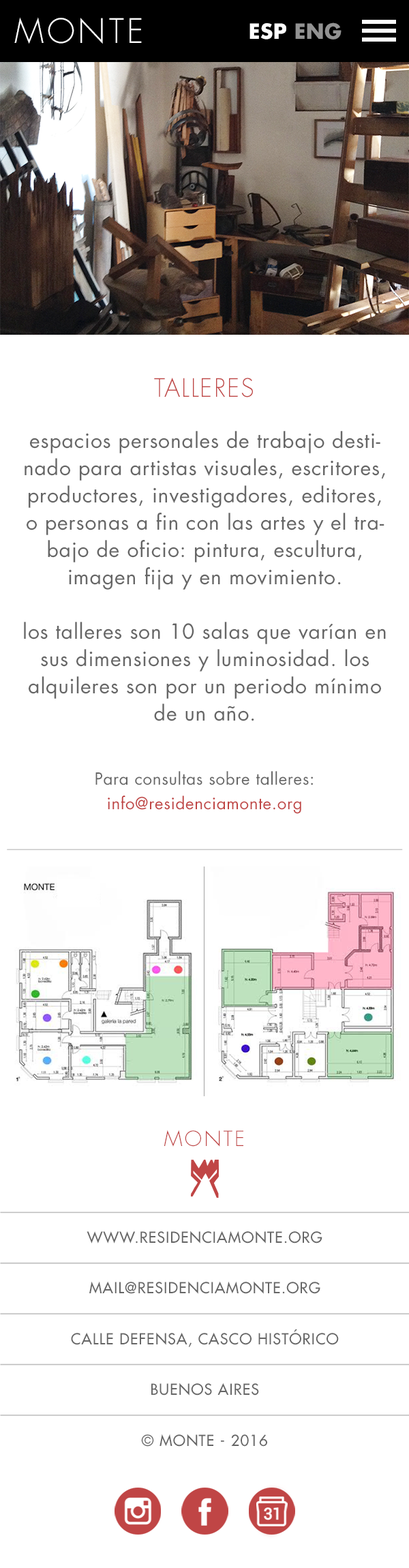
<style>
.page{position:relative;width:409px;height:1568px;background:#ffffff}
.page>*{position:absolute;margin:0}
.t1{font:32.7px "Futura-Light";letter-spacing:0.1em;color:#ffffff;text-transform:uppercase}
.t2{font:20.5px "Futura-Bold";letter-spacing:0.015em;color:#ffffff;text-transform:uppercase}
.t3{font:20.5px "Futura-Bold";letter-spacing:0.015em;color:#929292;text-transform:uppercase}
.t4{font:24.5px "Futura-Light";letter-spacing:0.05em;color:#c04645;text-transform:uppercase}
.t5{font:20.5px/27.3px "Futura-Book";letter-spacing:0.03em;color:#666666}
.t6{font:16.4px/24.5px "Futura-Book";letter-spacing:0.03em;color:#666666}
.t7{font:16.4px/24.5px "Futura-Book";letter-spacing:0.03em;color:#c04645}
.t8{font:20.5px "Futura-Light";letter-spacing:0.1em;color:#c04545}
.t9{font:15px/50.7px "Futura";letter-spacing:0.05em;color:#666666;text-transform:uppercase}
</style>
<div class="page">
<p class="t1" style="left:14px;top:17px;width:128px;height:27px">monte</p>
<p class="t2" style="left:250px;top:22px;width:92px;height:18px">esp <span class="t3">eng</span></p>
<p class="t4" style="left:154px;top:378px;width:99px;height:19px">talleres</p>
<p class="t5" style="left:24px;top:431px;width:362px;height:290px;text-align:center">espacios personales de trabajo destinado para artistas visuales, escritores, productores, investigadores, editores, o personas a fin con las artes y el trabajo de oficio: pintura, escultura, imagen fija y en movimiento. <br><br>los talleres son 10 salas que varían en sus dimensiones y luminosidad. los alquileres son por un periodo mínimo de un año.</p>
<p class="t6" style="left:95px;top:771px;width:218px;height:43px;text-align:center">Para consultas sobre talleres:<br><span class="t7">info@residenciamonte.org</span></p>
<p class="t8" style="left:164px;top:1130px;width:79px;height:17px">MONTE</p>
<p class="t9" style="left:71px;top:1231px;width:268px;height:216px;text-align:center">WWW.residenciamonte.org<br>mail@residenciamonte.org<br>calle defensa, casco histórico<br>Buenos Aires<br>© Monte - 2016</p>
</div>
